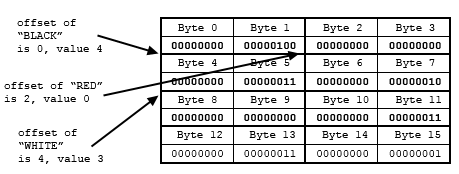
<style>
.page{position:relative;width:459px;height:174px;background:#ffffff}
.page>*{position:absolute;margin:0}
.t1{font:11px "CourierNewPSMT";color:#000000}
.t2{font:11px "CourierNewPS-BoldMT";color:#000000}
</style>
<div class="page">
<p class="t1" style="left:17px;top:19px;width:85px;height:35px">offset of<br>“BLACK”<br>is 0, value 4</p>
<p class="t1" style="left:178px;top:24px;width:257px;height:9px">Byte 0     Byte 1     Byte 2     Byte 3</p>
<p class="t2" style="left:171px;top:42px;width:270px;height:7px">00000000   00000100   00000000   00000000</p>
<p class="t1" style="left:178px;top:59px;width:257px;height:9px">Byte 4     Byte 5     Byte 6     Byte 7</p>
<p class="t2" style="left:171px;top:78px;width:270px;height:7px">00000000   00000011   00000000   00000010</p>
<p class="t1" style="left:4px;top:82px;width:99px;height:22px">offset of “RED”<br>is 2, value 0</p>
<p class="t1" style="left:178px;top:96px;width:263px;height:9px">Byte 8     Byte 9     Byte 10    Byte 11</p>
<p class="t2" style="left:171px;top:114px;width:270px;height:7px">00000000   00000000   00000000   00000011</p>
<p class="t1" style="left:18px;top:129px;width:85px;height:35px">offset of<br>“WHITE”<br>is 4, value 3</p>
<p class="t1" style="left:177px;top:131px;width:264px;height:9px">Byte 12    Byte 13    Byte 14    Byte 15</p>
<p class="t1" style="left:172px;top:150px;width:269px;height:7px">00000000   00000011   00000000   00000001</p>
</div>
